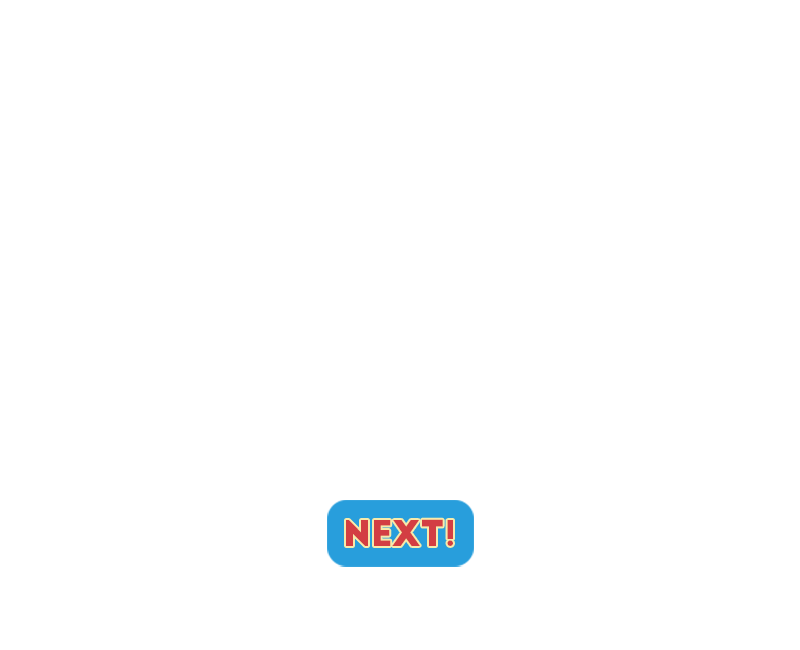
<style>
.page{position:relative;width:800px;height:650px;background:#ffffff}
.page>*{position:absolute;margin:0}
.t1{font:35px "BigJohn";color:#d33e43}
</style>
<div class="page">
<p class="t1" style="left:346px;top:519px;width:107px;height:27px">NEXT!</p>
</div>
